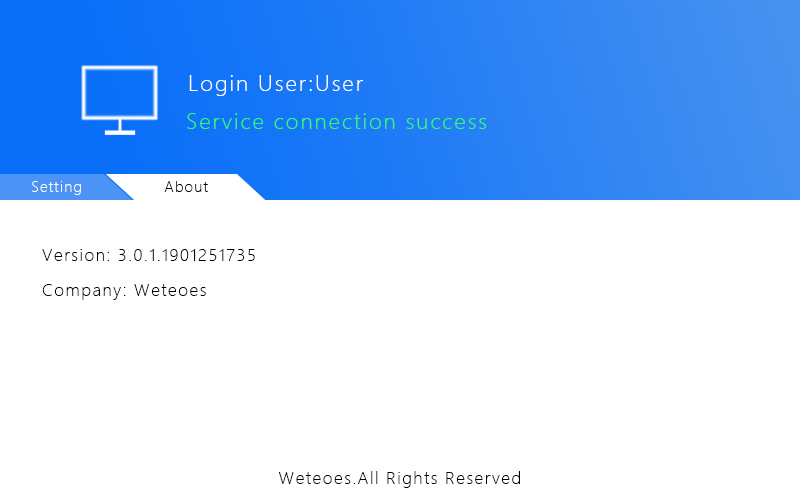
<style>
.page{position:relative;width:800px;height:500px;background:#ffffff}
.page>*{position:absolute;margin:0}
.t1{font:21.4px "MicrosoftYaHeiLight";letter-spacing:0.08em;color:#ffffff}
.t2{font:21.4px "MicrosoftYaHeiLight";letter-spacing:0.08em;color:#31fd6a}
.t3{font:14px "MicrosoftYaHeiLight";letter-spacing:0.08em;color:#ffffff}
.t4{font:14px "MicrosoftYaHeiLight";letter-spacing:0.08em;color:#010101}
.t5{font:16.4px "MicrosoftYaHeiLight";letter-spacing:0.08em;color:#000000}
</style>
<div class="page">
<p class="t1" style="left:189px;top:75px;width:174px;height:21px">Login User:User</p>
<p class="t2" style="left:187px;top:113px;width:300px;height:16px">Service connection success</p>
<p class="t3" style="left:32px;top:181px;width:49px;height:14px">Setting</p>
<p class="t4" style="left:164px;top:181px;width:44px;height:11px">About</p>
<p class="t5" style="left:42px;top:249px;width:213px;height:12px">Version: 3.0.1.1901251735</p>
<p class="t5" style="left:42px;top:284px;width:164px;height:16px">Company: Weteoes</p>
<p class="t5" style="left:278px;top:471px;width:242px;height:17px">Weteoes.All Rights Reserved</p>
</div>
